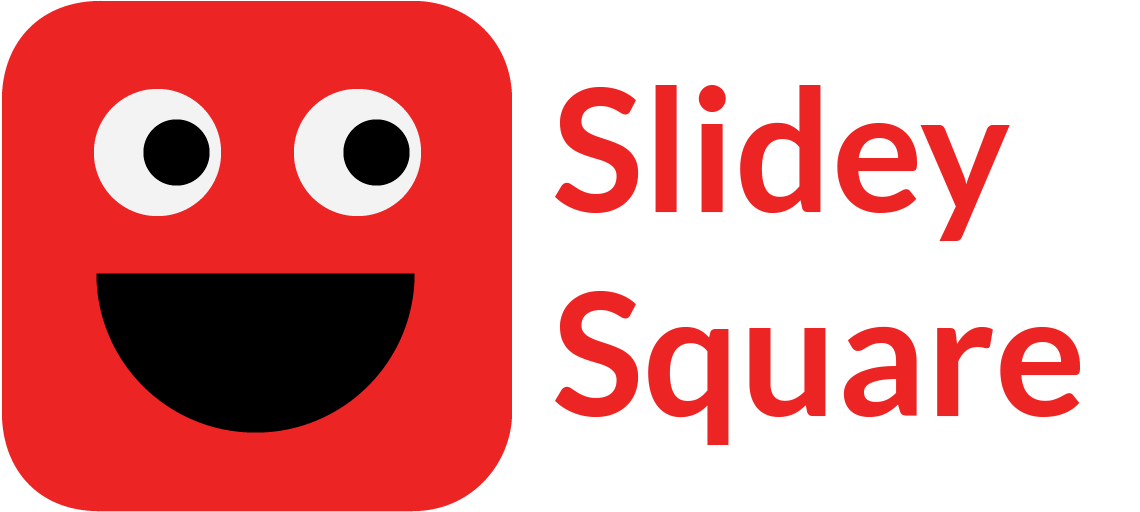
<style>
.page{position:relative;width:1140px;height:512px;background:#ffffff}
.page>*{position:absolute;margin:0}
.t1{font:170px "Lato-Bold";color:#ed2424}
</style>
<div class="page">
<p class="t1" style="left:555px;top:85px;width:525px;height:360px">Slidey Square</p>
</div>
